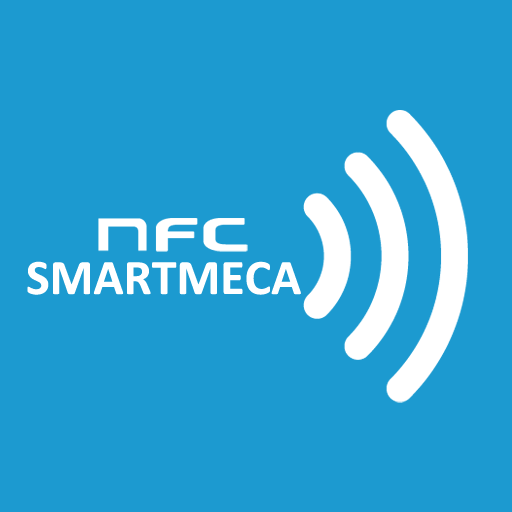
<style>
.page{position:relative;width:512px;height:512px;background:#1c9ad0}
.page>*{position:absolute;margin:0}
.t1{font:50px "Calibri-Bold";color:#ffffff}
</style>
<div class="page">
<p class="t1" style="left:27px;top:261px;width:274px;height:34px">SMARTMECA</p>
</div>
